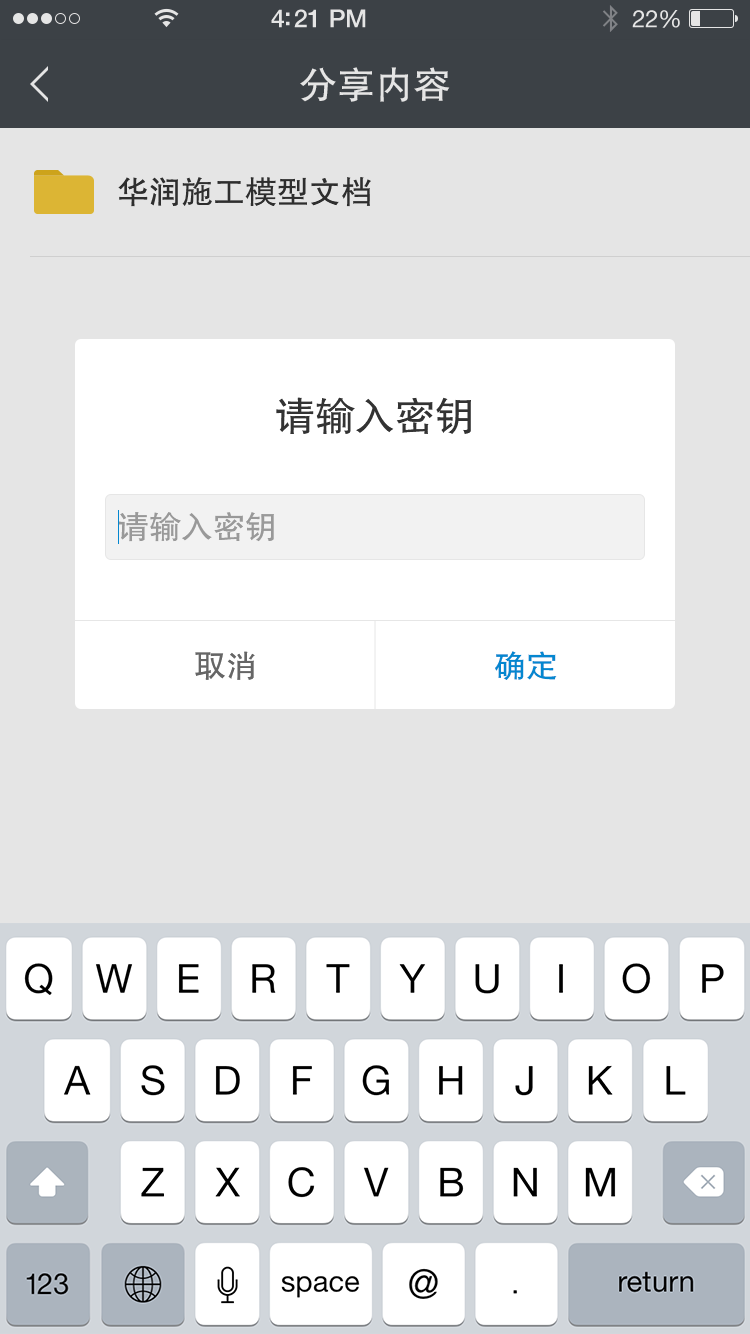
<style>
.page{position:relative;width:750px;height:1334px;background:#e5e5e5}
.page>*{position:absolute;margin:0}
.t1{font:38px "FZHTJW--GB1-0";color:#e5e5e5}
.t2{font:32px "FZHTJW--GB1-0";color:#333333}
.t3{font:40px "FZHTJW--GB1-0";color:#333333}
.t4{font:32px "FZHTJW--GB1-0";color:#999999}
.t5{font:32px "FZHTJW--GB1-0";color:#666666}
.t6{font:32px "FZHTJW--GB1-0";color:#0487d0}
</style>
<div class="page">
<p class="t1" style="left:300px;top:67px;width:150px;height:35px">分享内容</p>
<p class="t2" style="left:118px;top:177px;width:253px;height:30px">华润施工模型文档</p>
<p class="t3" style="left:276px;top:397px;width:195px;height:37px">请输入密钥</p>
<p class="t4" style="left:118px;top:512px;width:156px;height:30px">请输入密钥</p>
<p class="t5" style="left:195px;top:651px;width:60px;height:29px">取消</p>
<p class="t6" style="left:495px;top:651px;width:62px;height:29px">确定</p>
</div>
